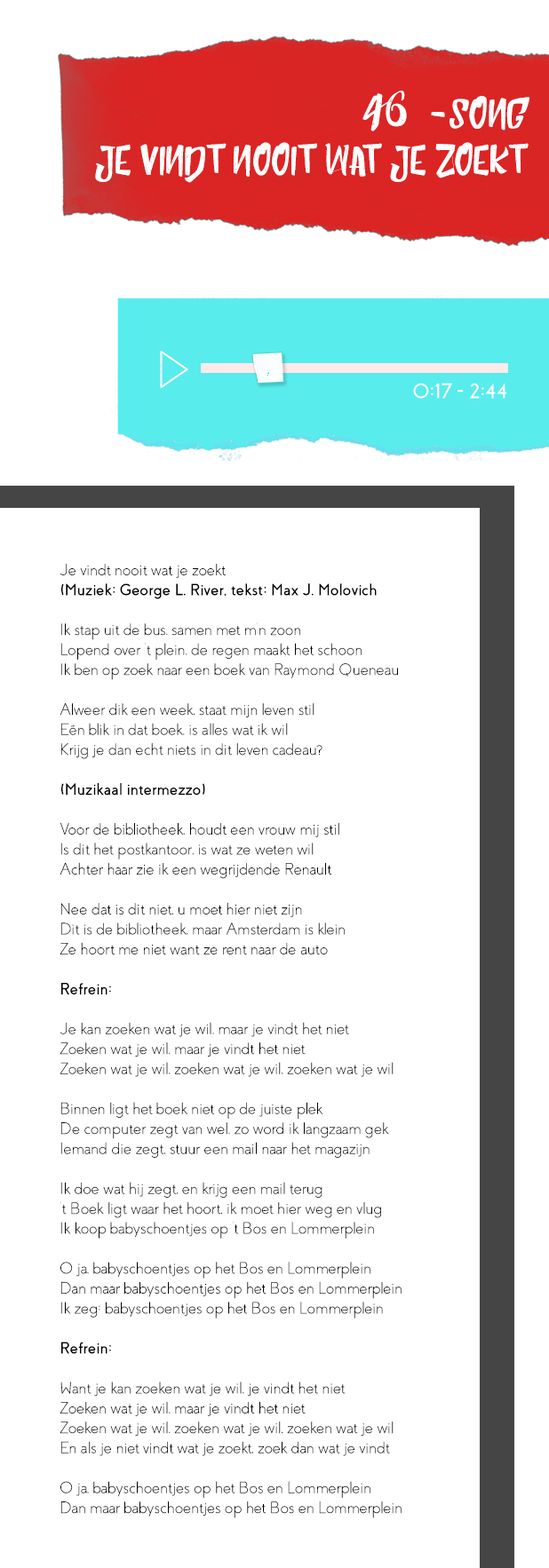
<style>
.page{position:relative;width:549px;height:1568px;background:#ffffff}
.page>*{position:absolute;margin:0}
.t1{font:38.9px "HumblleRoughtAllCaps";color:#ffffff}
.t2{font:54.9px "HumblleRoughtAllCaps";color:#ffffff}
.t3{font:17.7px "HumblleRoughtAllCaps";color:#ffffff;scale:2.16 1}
.t4{font:21.1px "Coves-Bold";color:#ffffff}
.t5{font:16.6px "Coves-Light";color:#000000}
.t6{font:16.6px "Coves-Bold";color:#000000}
</style>
<div class="page">
<p class="t1" style="left:95px;top:91px;width:434px;height:92px;text-align:right"><span class="t2">46 </span>    Song<br>Je vindt nooit wat je Zoekt</p>
<p class="t3" style="left:431px;top:112px;width:14px;height:5px;rotate:90deg">i</p>
<p class="t4" style="left:413px;top:383px;width:93px;height:16px">0:17 - 2:44</p>
<p class="t5" style="left:59px;top:564px;width:342px;height:954px">Je vindt nooit wat je zoekt<br><span class="t6">(Muziek: George L. River, tekst: Max J. Molovich<br></span><br>Ik stap uit de bus, samen met m’n zoon<br>Lopend over ‘t plein, de regen maakt het schoon<br>Ik ben op zoek naar een boek van Raymond Queneau<br><br>Alweer dik een week, staat mijn leven stil<br>Eén blik in dat boek, is alles wat ik wil<br>Krijg je dan echt niets in dit leven cadeau?<br><br><span class="t6">(Muzikaal intermezzo)<br></span><br>Voor de bibliotheek, houdt een vrouw mij stil<br>Is dit het postkantoor, is wat ze weten wil<br>Achter haar zie ik een wegrijdende Renault<br><br>Nee dat is dit niet, u moet hier niet zijn<br>Dit is de bibliotheek, maar Amsterdam is klein<br>Ze hoort me niet want ze rent naar de auto<br><br><span class="t6">Refrein:<br><br></span>Je kan zoeken wat je wil, maar je vindt het niet<br>Zoeken wat je wil, maar je vindt het niet<br>Zoeken wat je wil, zoeken wat je wil, zoeken wat je wil<br><br>Binnen ligt het boek niet op de juiste plek<br>De computer zegt van wel, zo word ik langzaam gek<br>Iemand die zegt, stuur een mail naar het magazijn<br><br>Ik doe wat hij zegt, en krijg een mail terug<br>‘t Boek ligt waar het hoort, ik moet hier weg en vlug<br>Ik koop babyschoentjes op ‘t Bos en Lommerplein<br><br>O ja, babyschoentjes op het Bos en Lommerplein<br>Dan maar babyschoentjes op het Bos en Lommerplein<br>Ik zeg: babyschoentjes op het Bos en Lommerplein<br><br><span class="t6">Refrein:<br><br></span>Want je kan zoeken wat je wil, je vindt het niet<br>Zoeken wat je wil, maar je vindt het niet<br>Zoeken wat je wil, zoeken wat je wil, zoeken wat je wil<br>En als je niet vindt wat je zoekt, zoek dan wat je vindt<br><br>O ja, babyschoentjes op het Bos en Lommerplein<br>Dan maar babyschoentjes op het Bos en Lommerplein<br>Ik zeg: babyschoentjes op het Bos en Lommerplein</p>
</div>
